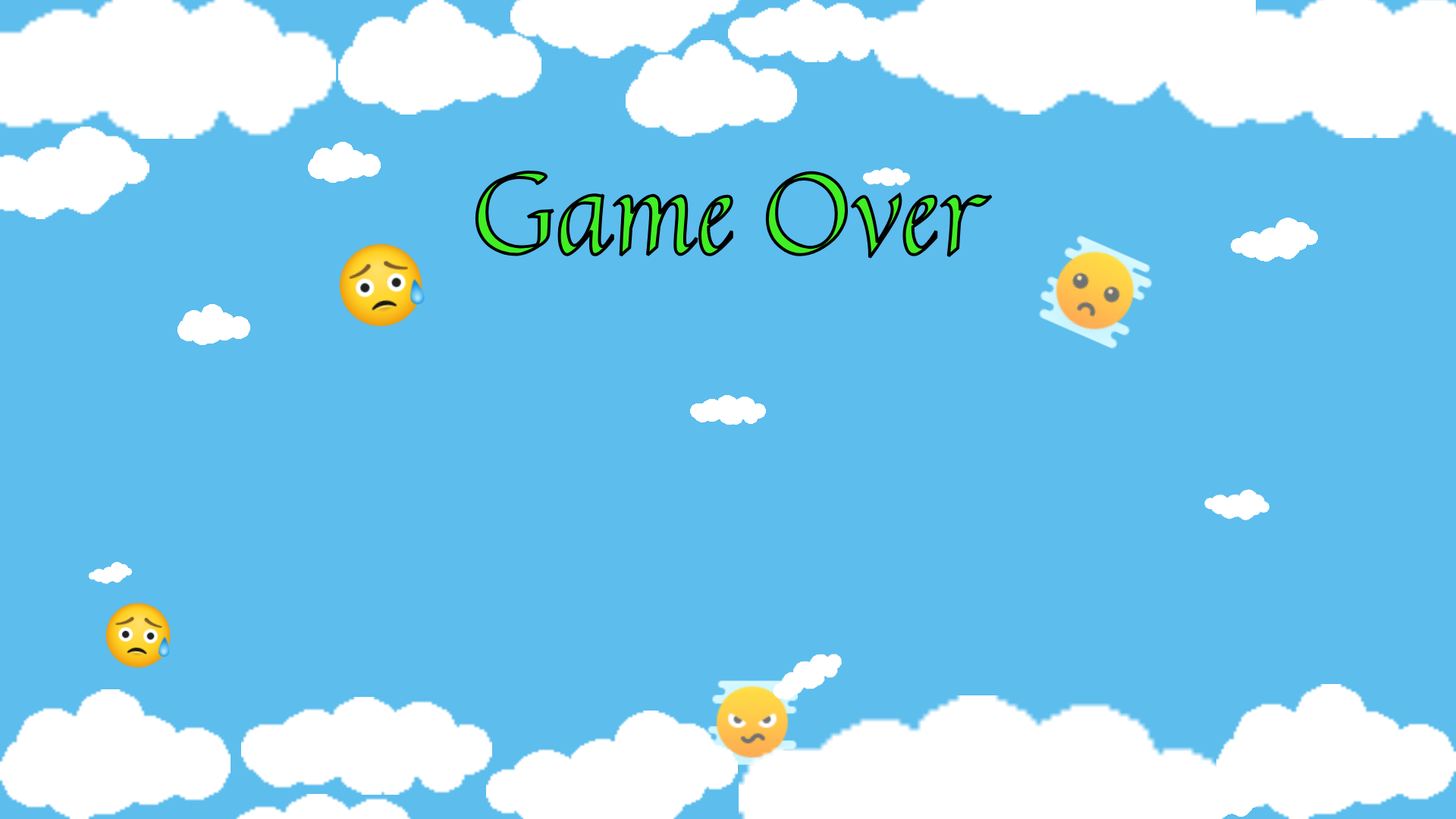
<style>
.page{position:relative;width:1456px;height:819px;background:#5dbded}
.page>*{position:absolute;margin:0}
.t1{font:113.7px "Quintessential-Regular"}
</style>
<div class="page">
<p class="t1" style="left:475px;top:171px;width:518px;height:88px">Game Over</p>
</div>
